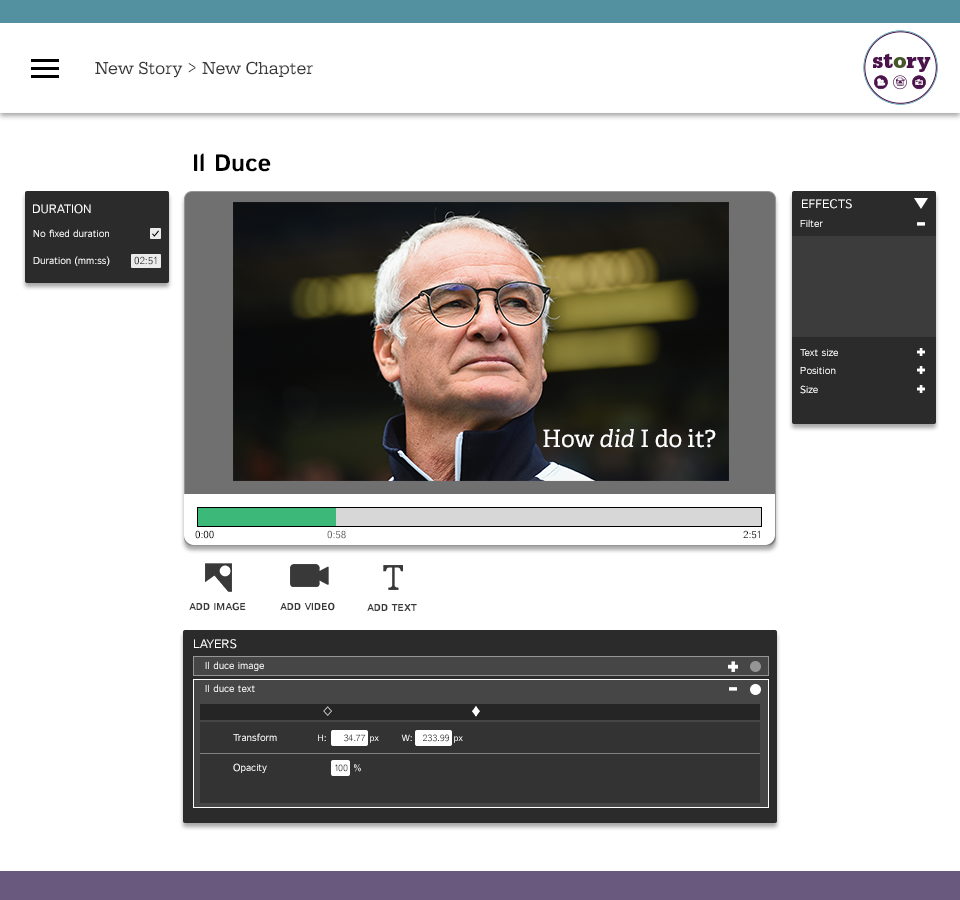
<style>
.page{position:relative;width:960px;height:900px;background:#ffffff}
.page>*{position:absolute;margin:0}
.t1{font:18px "Serifa-Reg";color:#393939}
.t2{font:18px "Factoria-Book";color:#393939}
.t3{font:24px "IstokWeb-Bold";color:#000000}
.t4{font:12px "IstokWeb-Regular";color:#ffffff;text-transform:uppercase}
.t5{font:10px "IstokWeb-Regular";color:#ffffff}
.t6{font:10px "IstokWeb-Regular";color:#323232}
.t7{font:10px "IstokWeb-Regular"}
.t8{font:24px "AdellePE";color:#ffffff}
.t9{font:24px "AdellePE-Italic";color:#ffffff}
.t10{font:10px "IstokWeb-Regular";color:#000000;text-transform:uppercase}
.t11{font:10px "IstokWeb-Regular";color:#666666;text-transform:uppercase}
.t12{font:10px "IstokWeb-Bold";color:#393939;text-transform:uppercase}
.t13{font:9px "IstokWeb-Regular";color:#ffffff}
.t14{font:9px "IstokWeb-Regular"}
.t15{font:9px "IstokWeb-Regular";color:#333333}
</style>
<div class="page">
<p class="t1" style="left:95px;top:61px;width:218px;height:17px">New Story<span class="t2"> &gt; </span>New Chapter</p>
<p class="t3" style="left:194px;top:153px;width:77px;height:19px">Il Duce</p>
<p class="t4" style="left:33px;top:204px;width:58px;height:10px">Duration</p>
<p class="t4" style="left:802px;top:199px;width:50px;height:10px">Effects</p>
<p class="t5" style="left:800px;top:219px;width:23px;height:8px">Filter</p>
<p class="t5" style="left:33px;top:229px;width:76px;height:8px">No fixed duration</p>
<p class="t5" style="left:33px;top:256px;width:77px;height:10px">Duration (mm:ss)</p>
<p class="t6" style="left:134px;top:256px;width:23px;height:9px">02:51</p>
<p class="t5" style="left:800px;top:349px;width:38px;height:7px">Text size</p>
<p class="t7" style="left:800px;top:367px;width:36px;height:7px">Position</p>
<p class="t5" style="left:800px;top:385px;width:18px;height:9px">Size</p>
<p class="t8" style="left:543px;top:429px;width:173px;height:19px">How <span class="t9">did </span>I do it?</p>
<p class="t10" style="left:195px;top:530px;width:19px;height:9px">0:00</p>
<p class="t11" style="left:327px;top:530px;width:19px;height:9px">0:58</p>
<p class="t10" style="left:743px;top:530px;width:17px;height:9px">2:51</p>
<p class="t12" style="left:189px;top:602px;width:57px;height:9px">add image</p>
<p class="t12" style="left:280px;top:602px;width:55px;height:9px">Add video</p>
<p class="t12" style="left:367px;top:604px;width:50px;height:7px">Add text</p>
<p class="t4" style="left:194px;top:639px;width:43px;height:10px">layers</p>
<p class="t5" style="left:205px;top:661px;width:59px;height:10px">Il duce image</p>
<p class="t5" style="left:205px;top:684px;width:50px;height:8px">Il duce text</p>
<p class="t7" style="left:233px;top:733px;width:44px;height:8px">Transform</p>
<p class="t13" style="left:318px;top:734px;width:8px;height:7px">H:</p>
<p class="t14" style="left:344px;top:734px;width:22px;height:8px">34.77</p>
<p class="t13" style="left:370px;top:736px;width:9px;height:7px">px</p>
<p class="t13" style="left:401px;top:734px;width:11px;height:7px">W:</p>
<p class="t15" style="left:423px;top:734px;width:26px;height:8px">233.99</p>
<p class="t13" style="left:454px;top:736px;width:9px;height:7px">px</p>
<p class="t5" style="left:233px;top:763px;width:34px;height:10px">Opacity</p>
<p class="t14" style="left:335px;top:764px;width:13px;height:8px">100</p>
<p class="t14" style="left:354px;top:764px;width:7px;height:8px">%</p>
</div>
